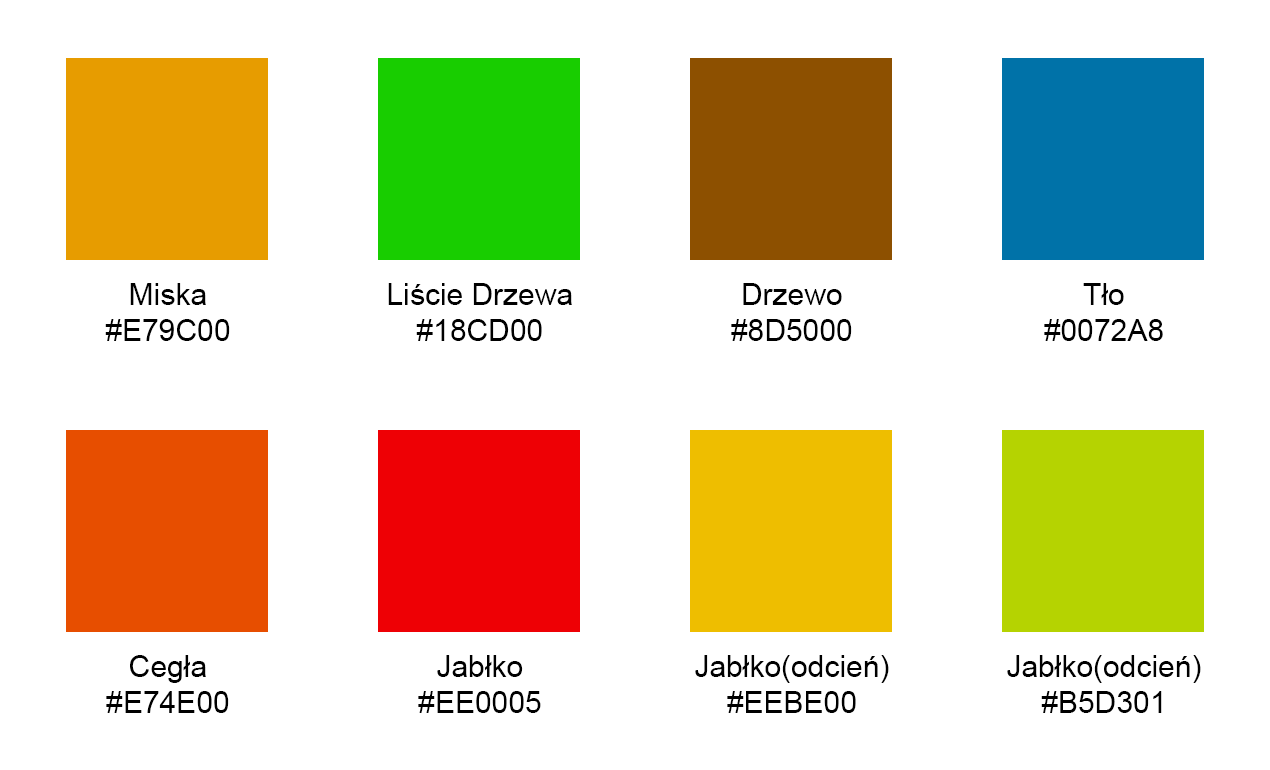
<style>
.page{position:relative;width:1270px;height:770px;background:#ffffff}
.page>*{position:absolute;margin:0}
.t1{font:30px "ArialMT";color:#000000}
</style>
<div class="page">
<p class="t1" style="left:105px;top:283px;width:125px;height:58px;text-align:center">Miska<br>#E79C00</p>
<p class="t1" style="left:388px;top:283px;width:184px;height:58px;text-align:center">Liście Drzewa<br>#18CD00</p>
<p class="t1" style="left:731px;top:283px;width:121px;height:58px;text-align:center">Drzewo<br>#8D5000</p>
<p class="t1" style="left:1044px;top:283px;width:119px;height:58px;text-align:center">Tło<br>#0072A8</p>
<p class="t1" style="left:106px;top:655px;width:123px;height:58px;text-align:center">Cegła<br>#E74E00</p>
<p class="t1" style="left:418px;top:655px;width:123px;height:58px;text-align:center">Jabłko<br>#EE0005</p>
<p class="t1" style="left:695px;top:655px;width:194px;height:58px;text-align:center">Jabłko(odcień)<br>#EEBE00</p>
<p class="t1" style="left:1007px;top:655px;width:194px;height:58px;text-align:center">Jabłko(odcień)<br>#B5D301</p>
</div>
